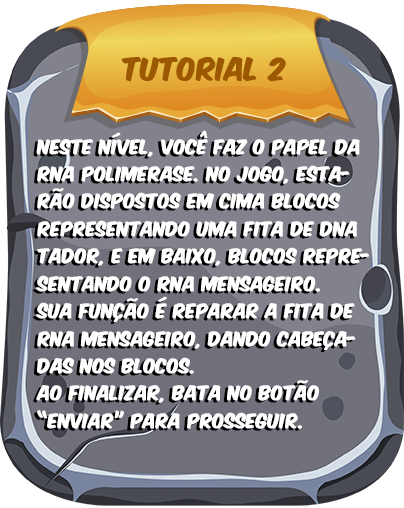
<style>
.page{position:relative;width:404px;height:508px}
.page>*{position:absolute;margin:0}
.t1{font:16.9px/27.4px "KomikaAxis";color:#ffffff;font-weight:bold}
</style>
<div class="page">
<p class="t1" style="left:36px;top:130px;width:333px;height:299px">nESTE NÍVEL, VOCÊ FAZ O PAPEL DA <br>rna polimerase. no jogo, esta-<br>rão dispostos em cima blocos<br>representando uma fita de dna<br>tador, e em baixo, blocos repre-<br>sentando o rna mensageiro.<br>sua função é reparar a fita de<br>rna mensageiro, dando cabeça-<br>das nos blocos. <br>ao finalizar, bata no botão<br>“ENVIAR” para prosseguir.</p>
</div>
